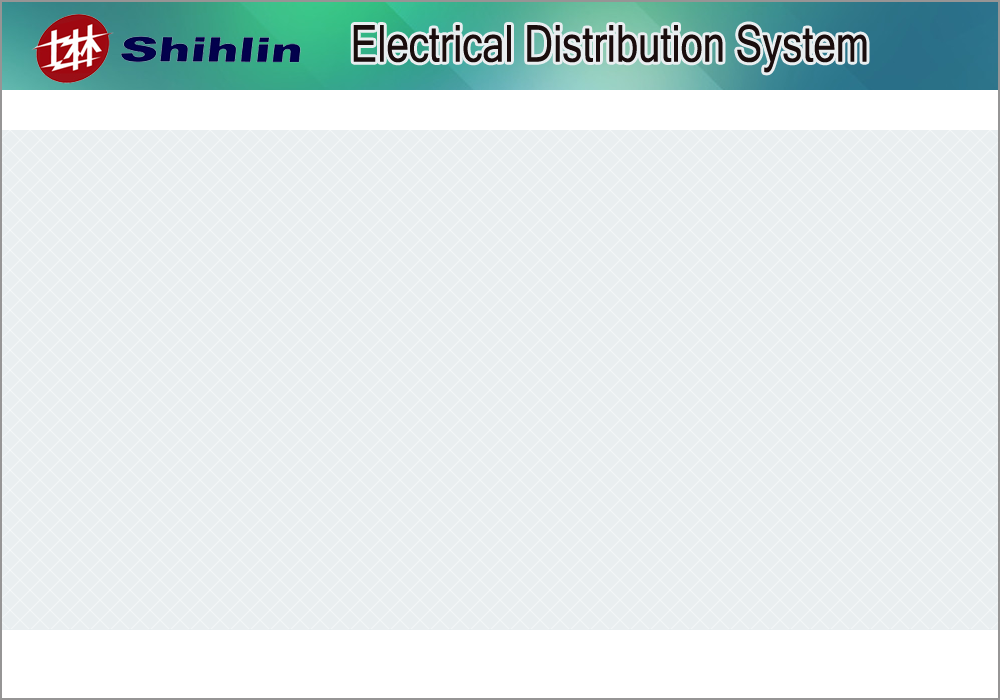
<style>
.page{position:relative;width:1000px;height:700px;background:#e9eef0}
.page>*{position:absolute;margin:0}
.t1{font:50.8px "MicrosoftSansSerif";color:#1a0d0d;scale:0.79 1}
</style>
<div class="page">
<p class="t1" style="left:353px;top:24px;width:514px;height:49px">Electrical Distribution System</p>
</div>
